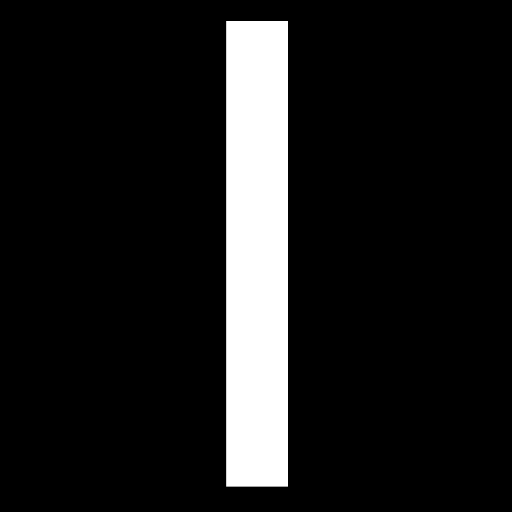
<style>
.page{position:relative;width:512px;height:512px;background:#000000}
.page>*{position:absolute;margin:0}
.t1{font:650px "ArialMT";color:#ffffff}
</style>
<div class="page">
<p class="t1" style="left:226px;top:21px;width:62px;height:466px">I</p>
</div>
